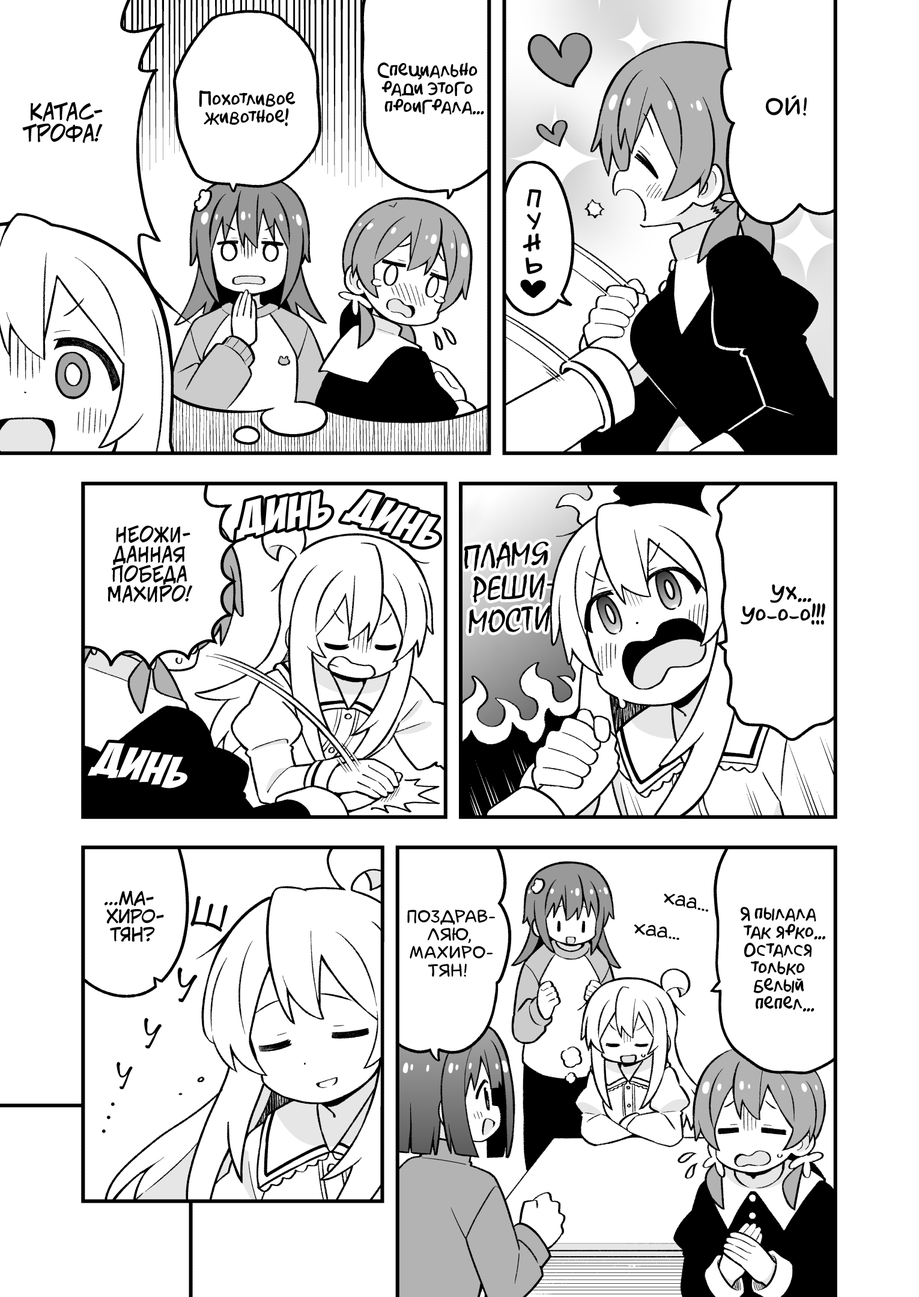
<style>
.page{position:relative;width:919px;height:1297px;background:#ffffff}
.page>*{position:absolute;margin:0}
.t1{font:18px "AkbarPlain";color:#000000}
.t2{font:25.2px "laCartoonerie";color:#000000;text-transform:uppercase}
.t3{font:21.6px "v_CCJeffCampbell";color:#000000;text-transform:uppercase}
.t4{font:21.6px "v_Augie";color:#000000;text-transform:uppercase}
.t5{font:50.5px "BadaBoom";color:#ffffff;scale:1.1 1}
.t6{font:19.8px "v_CCJeffCampbell";color:#000000;text-transform:uppercase}
.t7{font:32.4px "MistralC";color:#000000;text-transform:uppercase}
.t8{font:32.4px "MyriadPro-Regular";color:#000000;text-transform:uppercase}
.t9{font:21.6px "AkbarPlain";color:#000000}
.t10{font:18px "KuraiVoice2";color:#000000;text-transform:uppercase}
.t11{font:21.6px "v_Augie";color:#000000}
.t12{font:45.1px "DSNote";color:#000000}
.t13{font:18px "laCartoonerie";color:#000000;text-transform:uppercase}
.t14{font:40.8px "DSNote";color:#000000}
.t15{font:36px "DSNote";color:#000000}
.t16{font:32.4px "DSNote";color:#000000}
.t17{font:21.6px "DSNote";color:#000000}
</style>
<div class="page">
<p class="t1" style="left:377px;top:62px;width:107px;height:53px;text-align:center">Специально<br>ради этого<br>проиграла...</p>
<p class="t1" style="left:199px;top:90px;width:97px;height:36px;text-align:center">Похотливое<br>животное!</p>
<p class="t2" style="left:766px;top:96px;width:41px;height:20px">Ой!</p>
<p class="t3" style="left:22px;top:102px;width:81px;height:42px;text-align:center">Катас-<br>трофа!</p>
<p class="t4" style="left:527px;top:190px;width:14px;height:17px;rotate:8deg">п</p>
<p class="t4" style="left:527px;top:213px;width:14px;height:16px;rotate:3deg">у</p>
<p class="t4" style="left:523px;top:234px;width:18px;height:17px;rotate:-2deg">н</p>
<p class="t4" style="left:526px;top:258px;width:16px;height:16px;rotate:-7deg">ь</p>
<p class="t5" style="left:236px;top:492px;width:96px;height:48px;rotate:-6deg">динь</p>
<p class="t5" style="left:341px;top:492px;width:98px;height:55px;rotate:21deg">динь</p>
<p class="t6" style="left:108px;top:526px;width:85px;height:77px;text-align:center">Неожи-<br>данная<br>победа<br>Махиро!</p>
<p class="t7" style="left:464px;top:542px;width:92px;height:92px;text-align:center;rotate:-3deg">Пламя<br>реши<span class="t8">-<br></span>мости</p>
<p class="t9" style="left:741px;top:584px;width:84px;height:41px;text-align:center">Ух...<br>Уо-о-о!!!</p>
<p class="t5" style="left:88px;top:742px;width:99px;height:47px;rotate:12deg">динь</p>
<p class="t10" style="left:105px;top:891px;width:59px;height:51px;text-align:center">...Ма-<br>хиро-<br>тян?</p>
<p class="t11" style="left:664px;top:894px;width:44px;height:18px;rotate:11deg">хаа...</p>
<p class="t12" style="left:190px;top:896px;width:38px;height:36px;rotate:13deg">ш</p>
<p class="t13" style="left:407px;top:910px;width:88px;height:67px;text-align:center">Поздрав-<br>ляю,<br>Махиро-<br>тян!</p>
<p class="t1" style="left:741px;top:907px;width:84px;height:105px;text-align:center">Я пылала<br>так ярко...<br>Остался<br>только<br>белый<br>пепел...</p>
<p class="t11" style="left:634px;top:924px;width:45px;height:17px;rotate:8deg">хаа...</p>
<p class="t14" style="left:177px;top:968px;width:21px;height:35px;rotate:15deg">у</p>
<p class="t15" style="left:144px;top:1018px;width:18px;height:31px;rotate:14deg">у</p>
<p class="t16" style="left:117px;top:1062px;width:16px;height:28px;rotate:9deg">у</p>
<p class="t17" style="left:111px;top:1103px;width:4px;height:3px">.</p>
<p class="t17" style="left:107px;top:1116px;width:4px;height:4px">.</p>
<p class="t17" style="left:102px;top:1130px;width:4px;height:3px">.</p>
</div>
